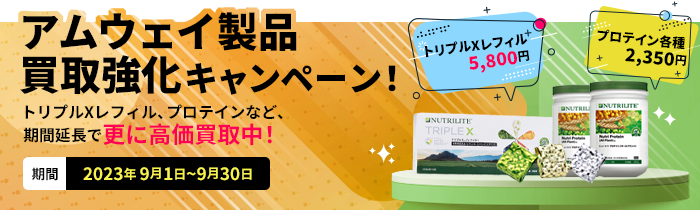
<style>
.page{position:relative;width:700px;height:210px}
.page>*{position:absolute;margin:0}
.t1{font:40.7px/43px "NotoSansCJKjp-Black";color:#000000}
.t2{font:34px/43px "NotoSansCJKjp-Black";color:#000000}
.t3{font:13.1px/14.5px "NotoSansCJKjp-Black";color:#000000}
.t4{font:17.9px/14.5px "NotoSansCJKjp-Black";color:#000000}
.t5{font:11.9px/14.5px "NotoSansCJKjp-Black";color:#000000}
.t6{font:17.9px/14.5px "NotoSansCJKjp-Black";color:#ff0054}
.t7{font:15.8px/19px "NotoSansCJKjp-Bold";color:#000000}
.t8{font:23px/19px "NotoSansCJKjp-Bold";color:#ff0054}
.t9{font:13.7px "NotoSansCJKjp-Bold";color:#000000}
.t10{font:17.3px "NotoSansCJKjp-Bold";color:#f8f250}
.t11{font:13.1px "NotoSansCJKjp-Bold";color:#f8f250}
</style>
<div class="page">
<p class="t1" style="left:20px;top:12px;width:376px;height:83px">アムウェイ製品<br>買取強化<span class="t2">キャンペーン！</span></p>
<p class="t3" style="left:597px;top:29px;width:90px;height:38px;text-align:right;rotate:5deg">プロテイン各種 <br><span class="t4"> 2,350</span><span class="t5">円</span></p>
<p class="t3" style="left:424px;top:33px;width:106px;height:40px;text-align:right;rotate:-7deg">トリプルXレフィル<br><span class="t6">5,800</span><span class="t5">円</span></p>
<p class="t7" style="left:23px;top:104px;width:260px;height:41px">トリプルXレフィル、プロテインなど、<br>期間延長で<span class="t8">更に高価買取中！</span></p>
<p class="t9" style="left:32px;top:167px;width:26px;height:14px">期間</p>
<p class="t10" style="left:83px;top:167px;width:169px;height:14px">2023<span class="t11">年 </span>9<span class="t11">月</span>1<span class="t11">日</span>~9<span class="t11">月</span>30<span class="t11">日</span></p>
</div>
